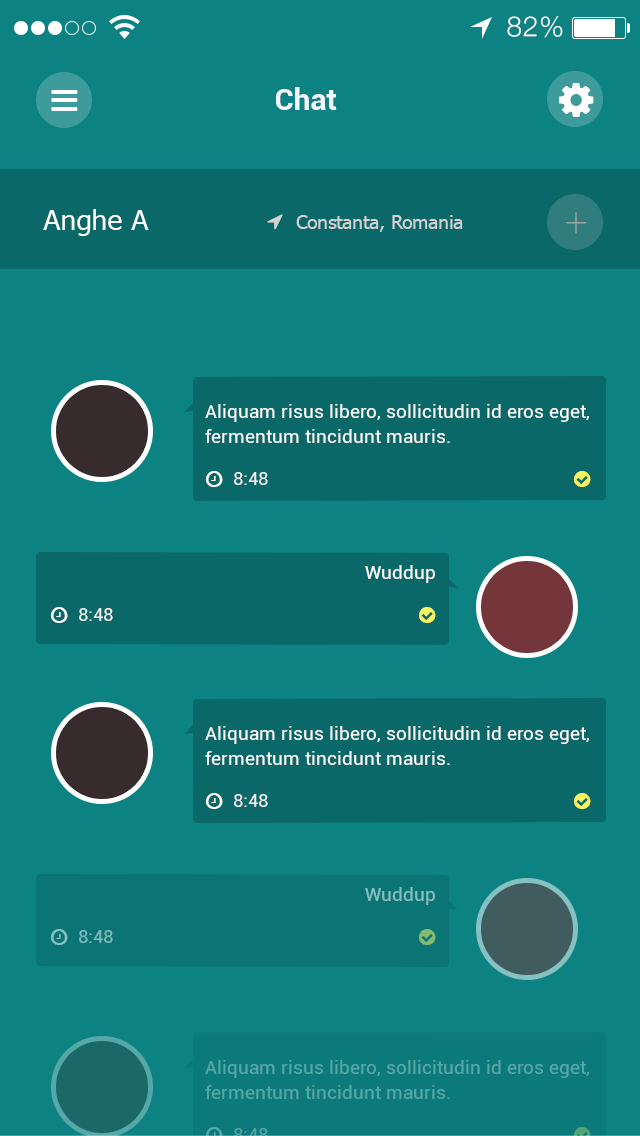
<style>
.page{position:relative;width:640px;height:1136px;background:#0d8282}
.page>*{position:absolute;margin:0}
.t1{font:28px "HelveticaNeue-Light";letter-spacing:0.025em;color:#ffffff}
.t2{font:30px "Roboto-Bold";color:#f4f5ff}
.t3{font:28px "Tahoma";color:#ffffff}
.t4{font:19px "Tahoma";color:#d3d3d3}
.t5{font:40px "Roboto-Thin"}
.t6{font:19px/25.3px "Roboto-Regular";color:#ffffff}
.t7{font:18px "Roboto-Regular";color:#f0f0f0}
.t8{font:19.1px "Roboto-Regular";color:#ffffff}
.t9{font:18.3px "Roboto-Regular";color:#f0f0f0}
.t10{font:19.1px "Roboto-Regular";color:#86c1c1}
.t11{font:18.3px "Roboto-Regular";color:#7fb9b9}
.t12{font:19px/25.3px "Roboto-Regular";color:#56a8a8}
</style>
<div class="page">
<p class="t1" style="left:507px;top:16px;width:56px;height:22px">82%</p>
<p class="t2" style="left:276px;top:87px;width:61px;height:23px">Chat</p>
<p class="t3" style="left:43px;top:209px;width:106px;height:27px">Anghe A</p>
<p class="t4" style="left:296px;top:215px;width:167px;height:17px">Constanta, Romania</p>
<p class="t5" style="left:566px;top:212px;width:21px;height:22px">+</p>
<p class="t6" style="left:205px;top:404px;width:384px;height:39px">Aliquam risus libero, sollicitudin id eros eget, fermentum tincidunt mauris.</p>
<p class="t7" style="left:234px;top:472px;width:34px;height:13px">8:48</p>
<p class="t8" style="left:365px;top:565px;width:70px;height:18px">Wuddup</p>
<p class="t9" style="left:79px;top:608px;width:34px;height:13px">8:48</p>
<p class="t6" style="left:205px;top:726px;width:384px;height:39px">Aliquam risus libero, sollicitudin id eros eget, fermentum tincidunt mauris.</p>
<p class="t7" style="left:234px;top:794px;width:34px;height:13px">8:48</p>
<p class="t10" style="left:365px;top:887px;width:70px;height:18px">Wuddup</p>
<p class="t11" style="left:79px;top:930px;width:34px;height:13px">8:48</p>
<p class="t12" style="left:205px;top:1060px;width:384px;height:39px">Aliquam risus libero, sollicitudin id eros eget, fermentum tincidunt mauris.</p>
</div>
